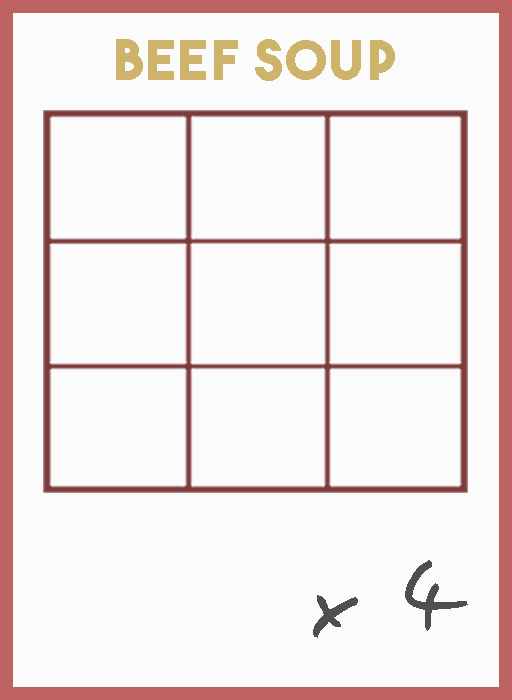
<style>
.page{position:relative;width:512px;height:700px;background:#fbfbfb}
.page>*{position:absolute;margin:0}
.t1{font:54.5px "TheBoldFont";letter-spacing:0.05em;color:#ceb36a}
.t2{font:106.1px "EasySpeech";letter-spacing:0.05em;color:#4f4f4f}
</style>
<div class="page">
<p class="t1" style="left:116px;top:39px;width:279px;height:42px">beef soup</p>
<p class="t2" style="left:313px;top:560px;width:155px;height:78px">x 4</p>
</div>
